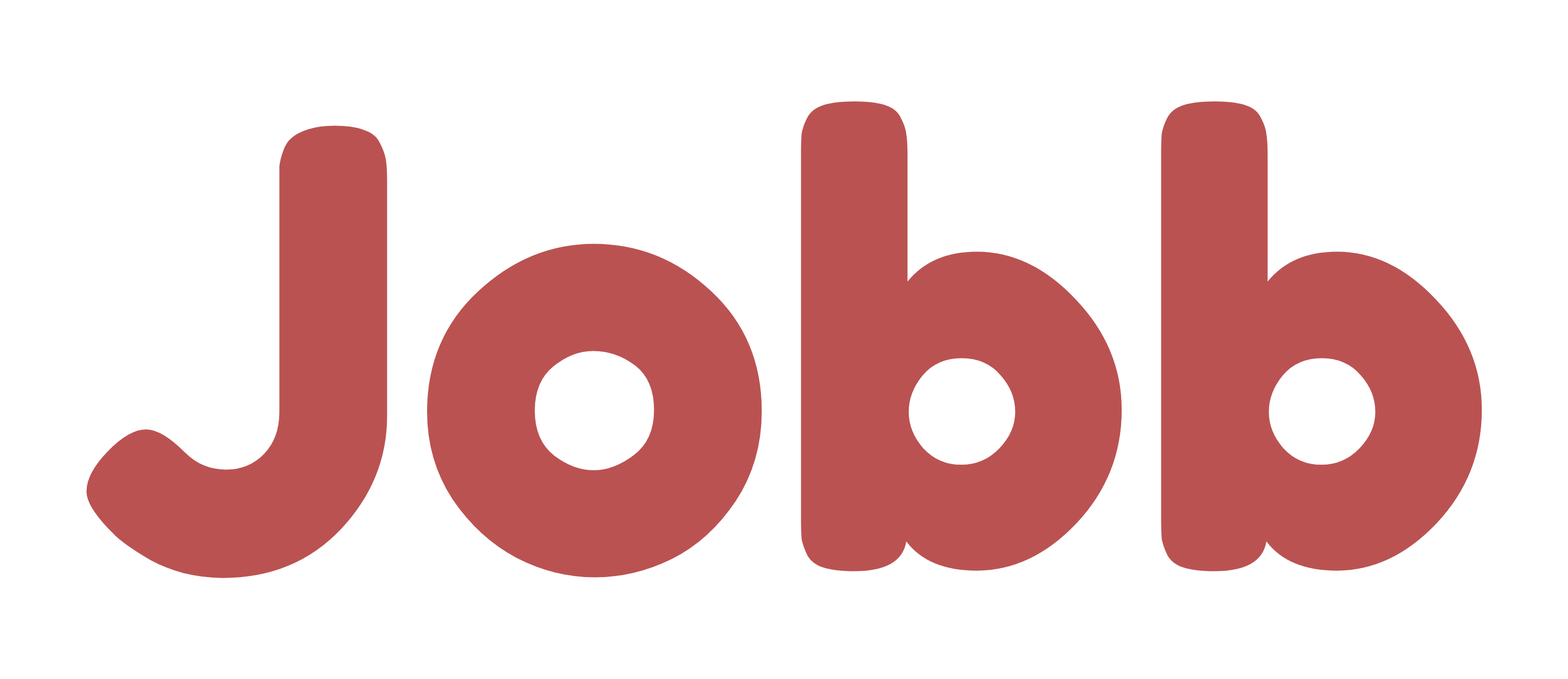
<style>
.page{position:relative;width:1568px;height:679px;background:#ffffff}
.page>*{position:absolute;margin:0}
.t1{font:608.5px "FredokaOne-Regular";color:#bb5252}
</style>
<div class="page">
<p class="t1" style="left:86px;top:101px;width:1396px;height:477px">Jobb</p>
</div>
